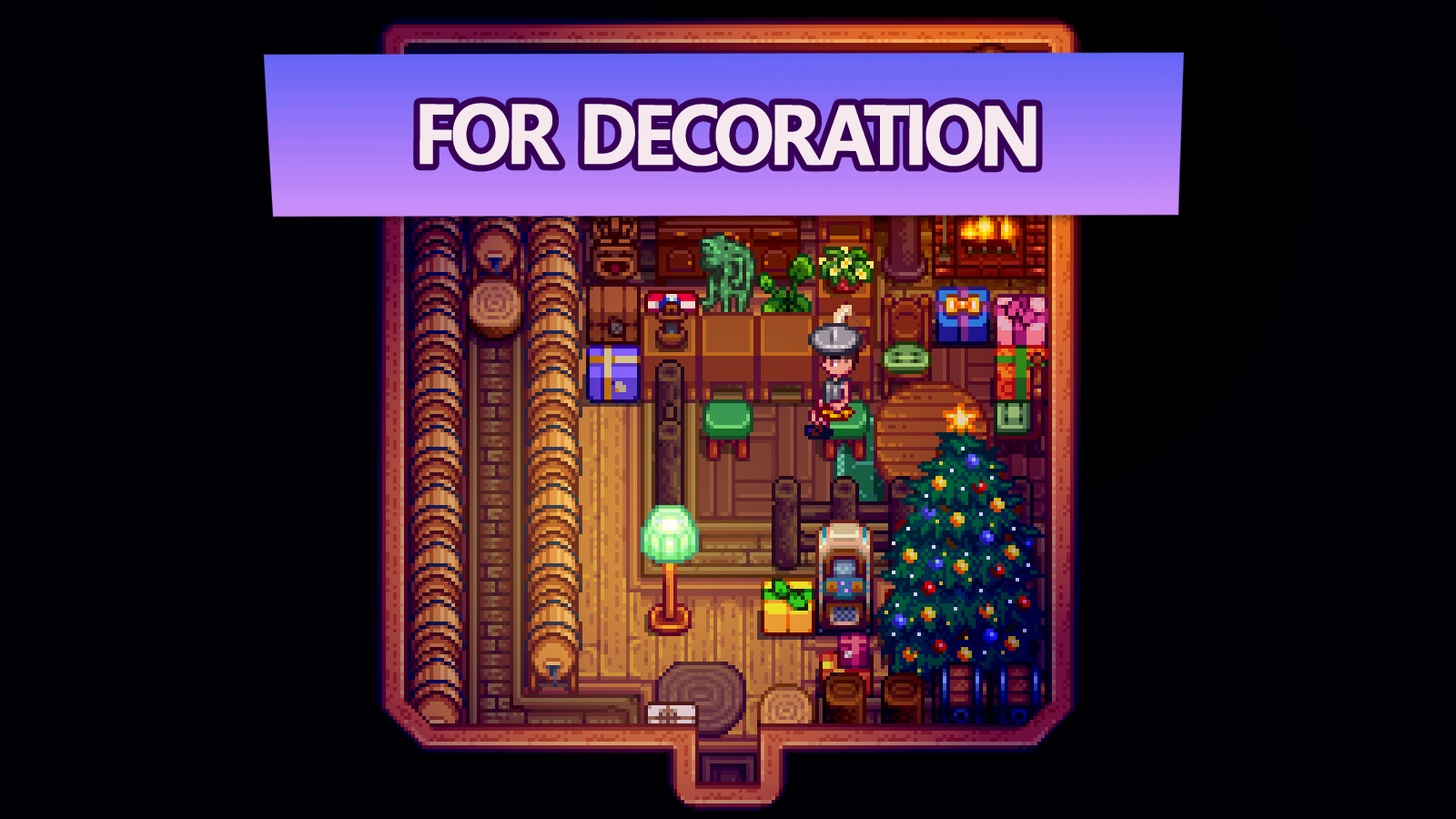
<style>
.page{position:relative;width:1456px;height:819px;background:#000004}
.page>*{position:absolute;margin:0}
.t1{font:81.9px "MalgunGothicBold";letter-spacing:-0.06em;color:#f5e9ee;text-transform:uppercase;font-weight:bold;scale:0.95 1}
</style>
<div class="page">
<p class="t1" style="left:420px;top:103px;width:616px;height:64px">for decoration</p>
</div>
